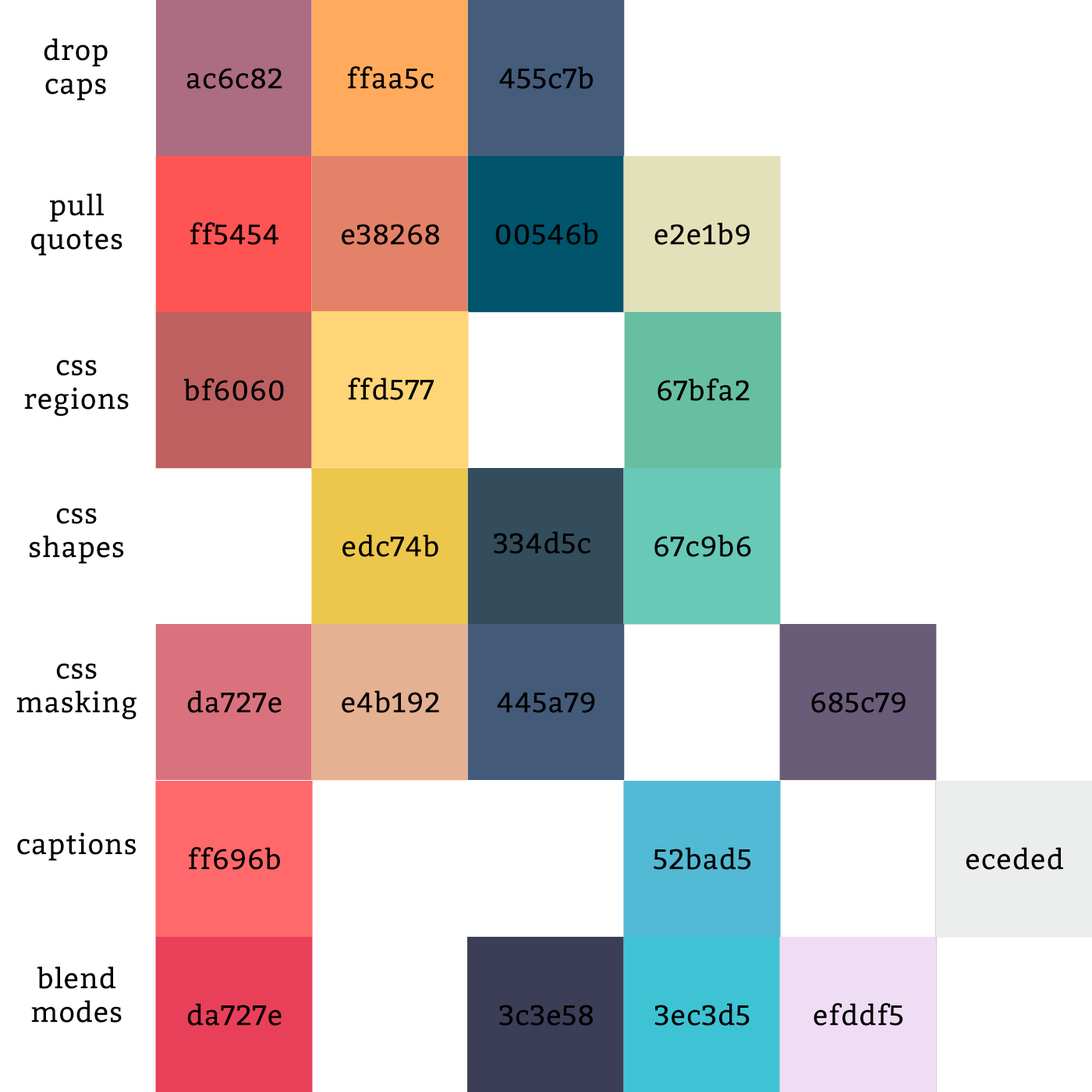
<style>
.page{position:relative;width:1092px;height:1092px;background:#ffffff}
.page>*{position:absolute;margin:0}
.t1{font:28.1px "Bitter-Regular";letter-spacing:0.025em;color:#000000}
</style>
<div class="page">
<p class="t1" style="left:44px;top:38px;width:64px;height:63px;text-align:center">drop<br>caps</p>
<p class="t1" style="left:186px;top:68px;width:96px;height:21px">ac6c82</p>
<p class="t1" style="left:348px;top:66px;width:86px;height:23px">ffaa5c</p>
<p class="t1" style="left:499px;top:66px;width:94px;height:23px">455c7b</p>
<p class="t1" style="left:31px;top:193px;width:91px;height:63px;text-align:center">pull<br>quotes</p>
<p class="t1" style="left:190px;top:222px;width:88px;height:23px">ff5454</p>
<p class="t1" style="left:342px;top:224px;width:97px;height:21px">e38268</p>
<p class="t1" style="left:495px;top:222px;width:103px;height:23px">00546b</p>
<p class="t1" style="left:654px;top:222px;width:96px;height:23px">e2e1b9</p>
<p class="t1" style="left:24px;top:360px;width:105px;height:57px;text-align:center">css<br>regions</p>
<p class="t1" style="left:348px;top:378px;width:86px;height:22px">ffd577</p>
<p class="t1" style="left:183px;top:378px;width:101px;height:23px">bf6060</p>
<p class="t1" style="left:658px;top:378px;width:92px;height:23px">67bfa2</p>
<p class="t1" style="left:30px;top:508px;width:94px;height:56px;text-align:center">css<br>shapes</p>
<p class="t1" style="left:494px;top:531px;width:97px;height:23px">334d5c</p>
<p class="t1" style="left:342px;top:534px;width:96px;height:23px">edc74b</p>
<p class="t1" style="left:654px;top:534px;width:97px;height:23px">67c9b6</p>
<p class="t1" style="left:16px;top:663px;width:120px;height:57px;text-align:center">css<br>masking</p>
<p class="t1" style="left:187px;top:690px;width:95px;height:23px">da727e</p>
<p class="t1" style="left:342px;top:690px;width:97px;height:23px">e4b192</p>
<p class="t1" style="left:497px;top:692px;width:98px;height:21px">445a79</p>
<p class="t1" style="left:811px;top:692px;width:95px;height:21px">685c79</p>
<p class="t1" style="left:17px;top:832px;width:119px;height:29px">captions</p>
<p class="t1" style="left:189px;top:847px;width:91px;height:23px">ff696b</p>
<p class="t1" style="left:653px;top:847px;width:98px;height:23px">52bad5</p>
<p class="t1" style="left:966px;top:847px;width:97px;height:23px">eceded</p>
<p class="t1" style="left:31px;top:966px;width:91px;height:57px;text-align:center">blend<br>modes</p>
<p class="t1" style="left:187px;top:1003px;width:95px;height:23px">da727e</p>
<p class="t1" style="left:499px;top:1005px;width:94px;height:21px">3c3e58</p>
<p class="t1" style="left:654px;top:1003px;width:96px;height:23px">3ec3d5</p>
<p class="t1" style="left:814px;top:1003px;width:89px;height:23px">efddf5</p>
</div>
